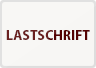
<style>
.page{position:relative;width:96px;height:68px;background:#f8f7f5}
.page>*{position:absolute;margin:0}
.t1{font:14px "MyriadPro-Bold";text-transform:uppercase}
</style>
<div class="page">
<p class="t1" style="left:6px;top:30px;width:84px;height:10px">LASTSCHRIFT</p>
</div>
